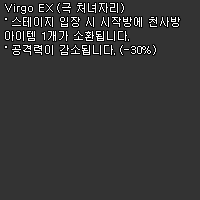
<style>
.page{position:relative;width:200px;height:200px;background:#333333}
.page>*{position:absolute;margin:0}
.t1{font:11px/14px "Dotum";color:#ffffff}
</style>
<div class="page">
<p class="t1" style="left:5px;top:3px;width:175px;height:52px">Virgo EX (극 처녀자리)<br>˚ 스테이지 입장 시 시작방에 천사방<br>아이템 1개가 소환됩니다.<br>˚ 공격력이 감소됩니다. (-30%)</p>
</div>
